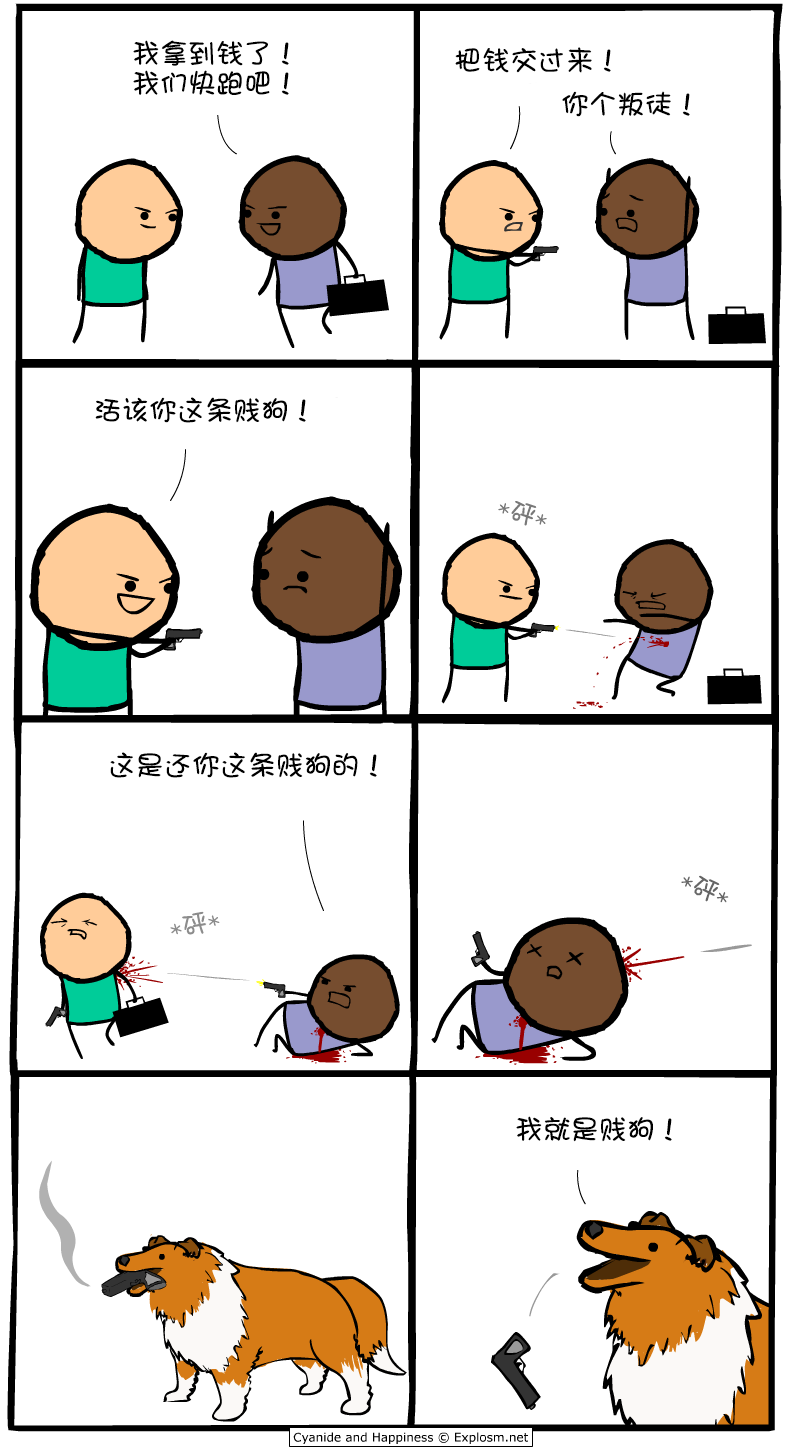
<style>
.page{position:relative;width:785px;height:1450px;background:#ffffff}
.page>*{position:absolute;margin:0}
.t1{font:28px/30px "DFGirl";color:#000000}
.t2{font:28px "DFGirl";color:#000000}
.t3{font:26px "DFGirl";color:#797979}
.t4{font:26px "DFGirl";color:#666666}
.t5{font:26px "DFGirl";color:#8c8c8c}
</style>
<div class="page">
<p class="t1" style="left:133px;top:40px;width:156px;height:55px">我拿到钱了！<br>我们快跑吧！</p>
<p class="t2" style="left:455px;top:47px;width:156px;height:26px">把钱交过来！</p>
<p class="t2" style="left:562px;top:91px;width:128px;height:26px">你个叛徒！</p>
<p class="t2" style="left:95px;top:397px;width:211px;height:26px">活该你这条贱狗！</p>
<p class="t3" style="left:498px;top:501px;width:49px;height:25px;rotate:17deg">*砰*</p>
<p class="t2" style="left:110px;top:752px;width:267px;height:26px">这是还你这条贱狗的！</p>
<p class="t4" style="left:681px;top:875px;width:48px;height:28px;rotate:24deg">*砰*</p>
<p class="t5" style="left:170px;top:911px;width:50px;height:24px;rotate:-12deg">*砰*</p>
<p class="t2" style="left:516px;top:1116px;width:156px;height:26px">我就是贱狗！</p>
</div>
